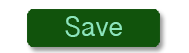
<style>
.page{position:relative;width:189px;height:53px;background:#11530c}
.page>*{position:absolute;margin:0}
.t1{font:24px "BanglaSangamMN";color:#8ce6ba}
</style>
<div class="page">
<p class="t1" style="left:65px;top:16px;width:57px;height:21px">Save</p>
</div>
